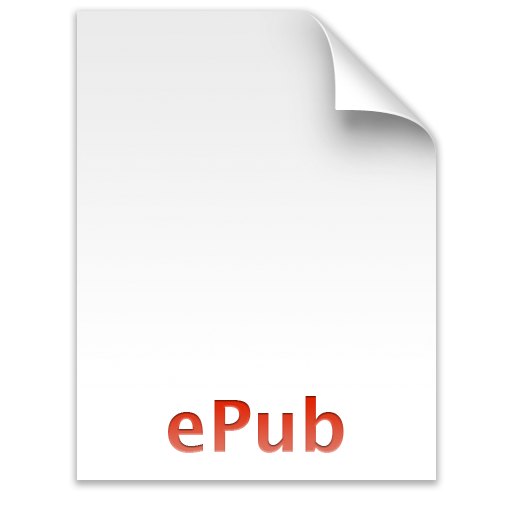
<style>
.page{position:relative;width:512px;height:512px;background:#ffffff}
.page>*{position:absolute;margin:0}
.t1{font:72px "LucidaGrande-Bold"}
</style>
<div class="page">
<p class="t1" style="left:168px;top:396px;width:176px;height:57px">ePub</p>
</div>
